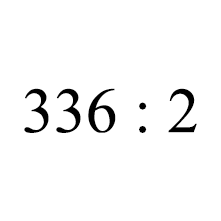
<style>
.page{position:relative;width:221px;height:221px;background:#ffffff}
.page>*{position:absolute;margin:0}
.t1{font:63.9px "TimesNewRomanPSMT";color:#000000}
</style>
<div class="page">
<p class="t1" style="left:24px;top:88px;width:173px;height:45px">336 : 2</p>
</div>
